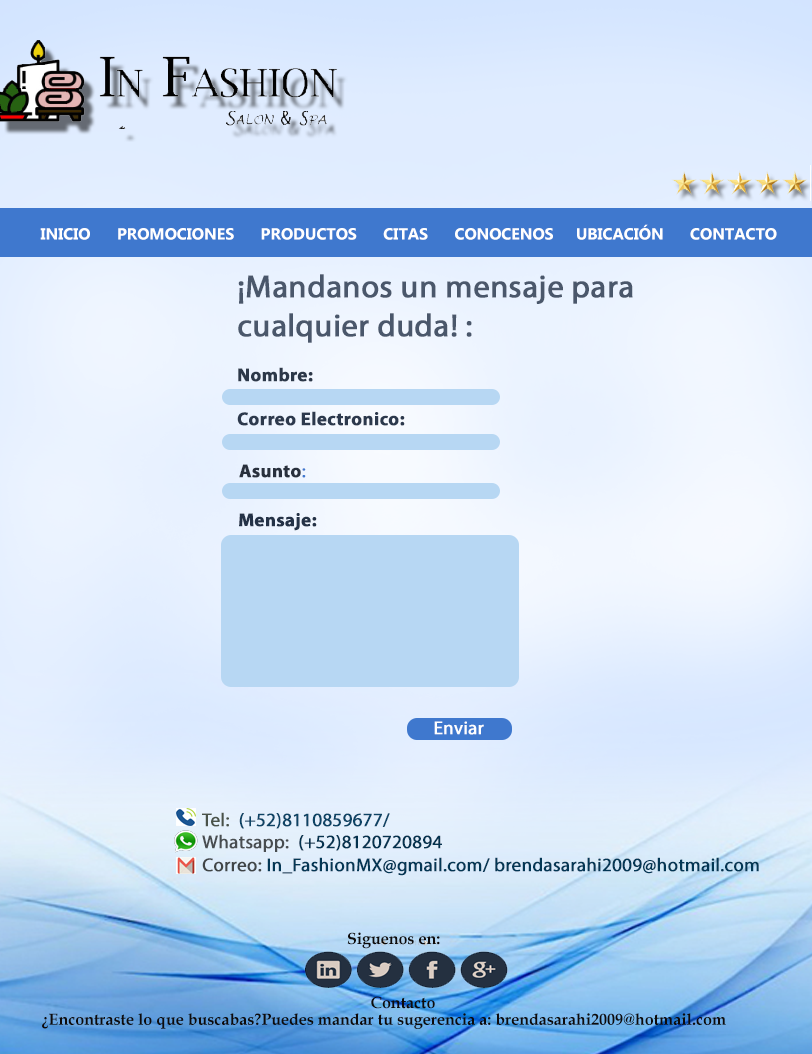
<style>
.page{position:relative;width:812px;height:1054px}
.page>*{position:absolute;margin:0}
.t1{font:16px "MicrosoftTaiLe-Bold";color:#ffffff}
.t2{font:12px "MicrosoftTaiLe-Bold";color:#ffffff}
.t3{font:32px "MyriadPro-Regular";color:#4a576b;font-weight:bold}
.t4{font:18.7px "MyriadPro-Bold";color:#2c3849;font-weight:bold}
.t5{font:18.7px "MyriadPro-Bold";color:#2c394d;font-weight:bold}
.t6{font:18.7px "MyriadPro-Bold";color:#28303d;font-weight:bold}
.t7{font:18.7px "MyriadPro-Regular";color:#3f78ce;font-weight:bold}
.t8{font:18.7px "MyriadPro-Bold";color:#243247;font-weight:bold}
.t9{font:18.7px "MyriadPro-Regular";color:#ffffff;font-weight:bold}
.t10{font:18.7px "MyriadPro-Regular";color:#033755;font-weight:bold}
.t11{font:18.7px "MyriadPro-Regular";color:#495249;font-weight:bold}
.t12{font:18.7px "MyriadPro-Regular";color:#0d4465;font-weight:bold}
.t13{font:18.7px "MyriadPro-Regular";color:#484d50;font-weight:bold}
.t14{font:18.7px "MyriadPro-Regular";color:#04334f;font-weight:bold}
.t15{font:18.7px "MyriadPro-Regular";color:#404547;font-weight:bold}
.t16{font:12px "BookAntiqua-Bold";color:#0e0b0b}
</style>
<div class="page">
<p class="t1" style="left:40px;top:224px;width:737px;height:16px"><span class="t2">    I</span>NICIO      PROMOCIONES      PRODUCTOS      CITAS      CONOCENOS     UBICACIÓN      CONTACTO</p>
<p class="t3" style="left:238px;top:274px;width:395px;height:108px">¡Mandanos un mensaje para<br>cualquier duda! :<br><br><span class="t4">Nombre:</span></p>
<p class="t5" style="left:237px;top:411px;width:168px;height:15px">Correo Electronico:</p>
<p class="t6" style="left:239px;top:464px;width:67px;height:14px">Asunto<span class="t7">:</span></p>
<p class="t8" style="left:239px;top:513px;width:78px;height:18px">Mensaje:</p>
<p class="t9" style="left:434px;top:721px;width:50px;height:14px">Enviar</p>
<p class="t10" style="left:202px;top:812px;width:557px;height:64px"><span class="t11">Tel:  </span><span class="t12">(+52)8110859677/<br></span><span class="t13">Whatsapp:  </span><span class="t14">(+52)8120720894<br></span><span class="t15">Correo: </span>In_FashionMX@gmail.com/ brendasarahi2009@hotmail.com</p>
<p class="t16" style="left:347px;top:932px;width:93px;height:17px">Siguenos en:</p>
<p class="t16" style="left:371px;top:996px;width:64px;height:13px">Contacto</p>
<p class="t16" style="left:42px;top:1013px;width:684px;height:16px">¿Encontraste lo que buscabas?Puedes mandar tu sugerencia a: brendasarahi2009@hotmail.com</p>
</div>
